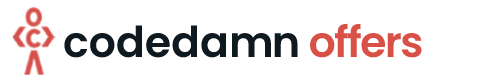
<style>
.page{position:relative;width:500px;height:83px;background:#ffffff}
.page>*{position:absolute;margin:0}
.t1{font:42.6px "Poppins-SemiBold";color:#0f1a20}
</style>
<div class="page">
<p class="t1" style="left:64px;top:23px;width:358px;height:35px">codedamn offers</p>
</div>
